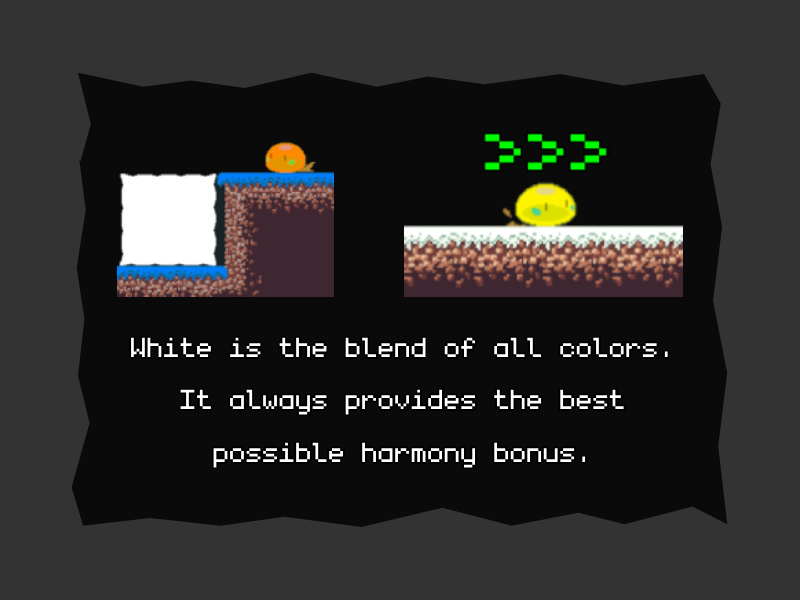
<style>
.page{position:relative;width:800px;height:600px;background:#0a0a0a}
.page>*{position:absolute;margin:0}
.t1{font:44px "monogram";color:#ffffff}
</style>
<div class="page">
<p class="t1" style="left:131px;top:337px;width:537px;height:131px;text-align:center">White is the blend of all colors.<br>It always provides the best<br>possible harmony bonus.</p>
</div>
